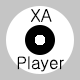
<style>
.page{position:relative;width:80px;height:80px;background:#c5c5c5}
.page>*{position:absolute;margin:0}
.t1{font:17px "Gulim";color:#000000}
</style>
<div class="page">
<p class="t1" style="left:31px;top:9px;width:21px;height:13px">XA</p>
<p class="t1" style="left:17px;top:56px;width:47px;height:16px">Player</p>
</div>
